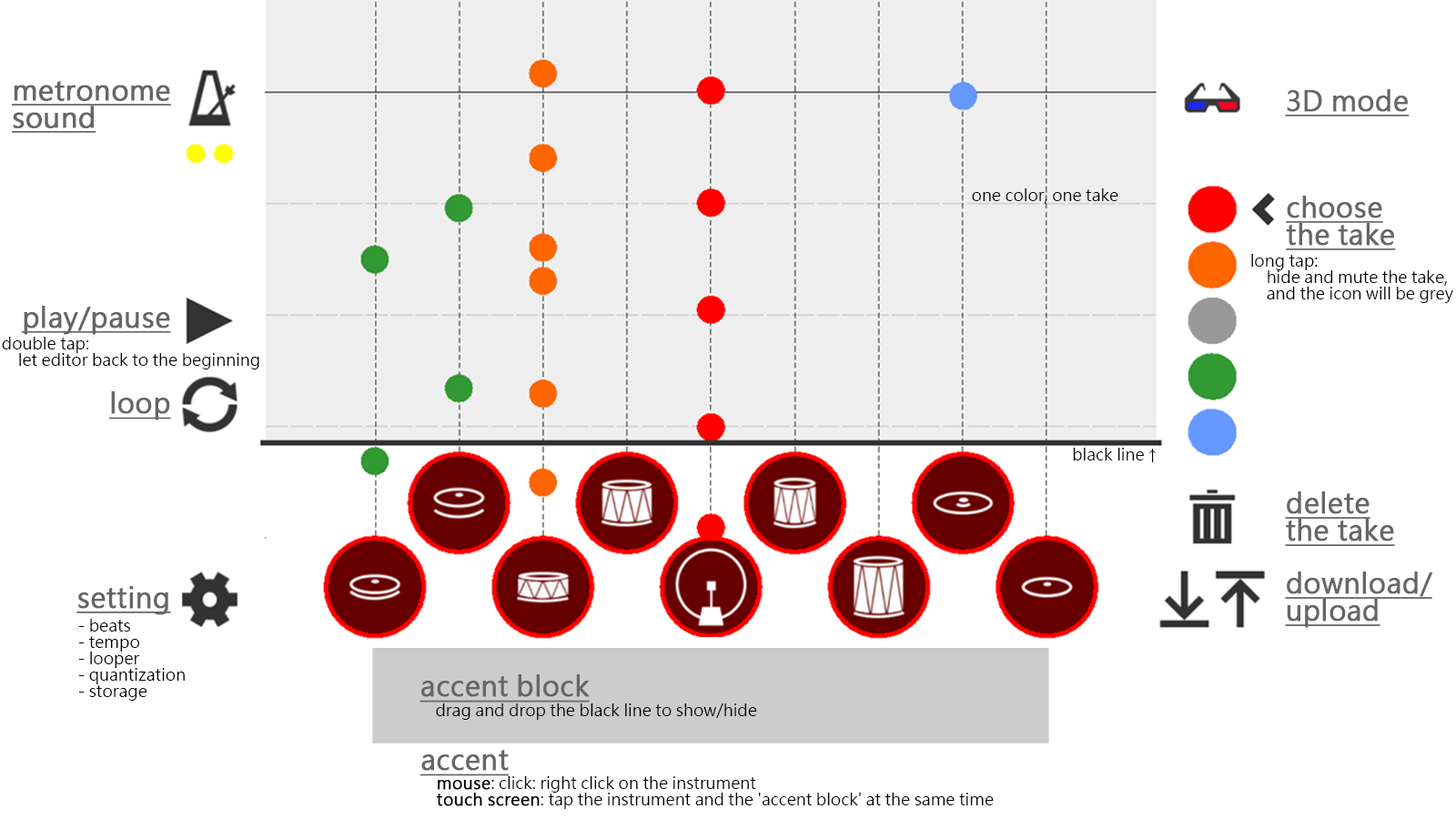
<style>
.page{position:relative;width:1456px;height:819px;background:#ffffff}
.page>*{position:absolute;margin:0}
.t1{font:27.1px/27.1px "MicrosoftJhengHeiRegular";color:#666666;font-weight:bold;text-decoration:underline}
.t2{font:27.3px "MicrosoftJhengHeiRegular";color:#666666;font-weight:bold;text-decoration:underline}
.t3{font:16.4px "MicrosoftJhengHeiRegular";color:#000000}
.t4{font:27.3px/27.3px "MicrosoftJhengHeiRegular";color:#666666;font-weight:bold;text-decoration:underline}
.t5{font:16.4px/16.4px "MicrosoftJhengHeiRegular";color:#000000}
.t6{font:16.4px/16.4px "MicrosoftJhengHeiRegular";color:#000000;font-weight:bold}
</style>
<div class="page">
<p class="t1" style="left:12px;top:81px;width:159px;height:52px">metronome<br>sound</p>
<p class="t2" style="left:1285px;top:89px;width:125px;height:27px">3D mode</p>
<p class="t3" style="left:972px;top:188px;width:146px;height:16px">one color, one take</p>
<p class="t4" style="left:1286px;top:196px;width:110px;height:54px">choose<br>the take</p>
<p class="t5" style="left:1251px;top:254px;width:202px;height:49px">long tap:<br>    hide and mute the take,<br>    and the icon will be grey</p>
<p class="t2" style="left:21px;top:306px;width:150px;height:29px">play/pause</p>
<p class="t5" style="left:2px;top:337px;width:257px;height:32px">double tap: <br>    let editor back to the beginning</p>
<p class="t2" style="left:108px;top:391px;width:63px;height:29px">loop</p>
<p class="t3" style="left:1073px;top:448px;width:83px;height:14px">black line↑</p>
<p class="t4" style="left:1285px;top:491px;width:110px;height:55px">delete<br>the take</p>
<p class="t4" style="left:1285px;top:571px;width:147px;height:57px">download/<br>upload</p>
<p class="t2" style="left:76px;top:586px;width:95px;height:29px">setting</p>
<p class="t5" style="left:78px;top:619px;width:107px;height:82px">- beats<br>- tempo<br>- looper<br>- quantization<br>- storage</p>
<p class="t2" style="left:420px;top:674px;width:170px;height:29px">accent block</p>
<p class="t3" style="left:436px;top:703px;width:321px;height:17px">drag and drop the black line to show/hide</p>
<p class="t2" style="left:420px;top:750px;width:89px;height:26px">accent</p>
<p class="t5" style="left:436px;top:776px;width:558px;height:33px"><span class="t6">mouse</span>: click: right click on the instrument<br><span class="t6">touch screen</span>: tap the instrument and the 'accent block' at the same time</p>
</div>
